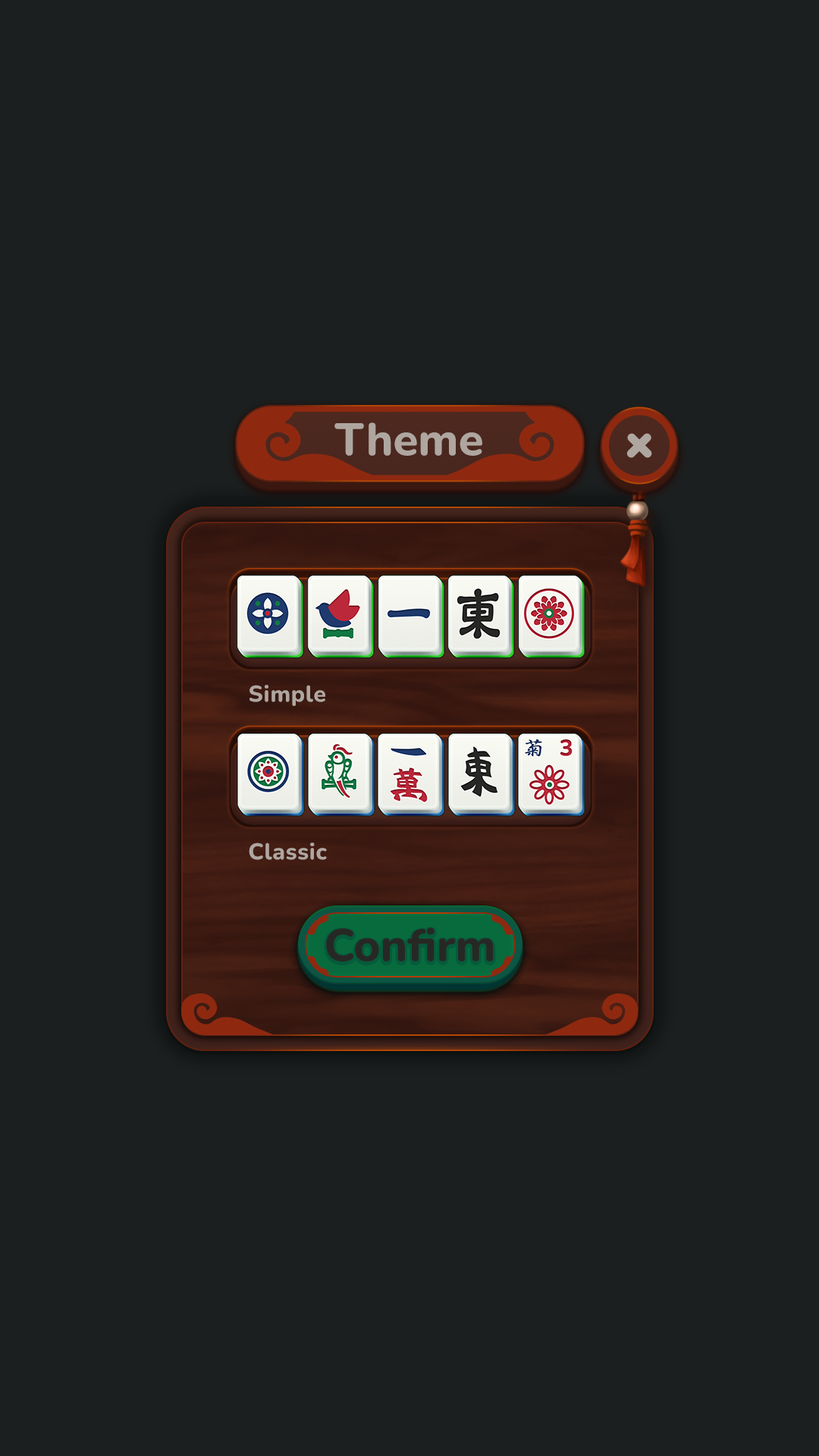
<style>
.page{position:relative;width:819px;height:1456px;background:#1c1f1f}
.page>*{position:absolute;margin:0}
.t1{font:45.5px "Nunito-ExtraBold";color:#afa6a0}
.t2{font:22.7px "Nunito-ExtraBold";letter-spacing:0.025em;color:#afa6a0}
.t3{font:45.5px "Nunito-ExtraBold";color:#272825}
</style>
<div class="page">
<p class="t1" style="left:334px;top:422px;width:148px;height:34px">Theme</p>
<p class="t2" style="left:249px;top:685px;width:76px;height:21px">Simple</p>
<p class="t2" style="left:249px;top:842px;width:78px;height:18px">Classic</p>
<p class="t3" style="left:326px;top:927px;width:168px;height:35px">Confirm</p>
</div>
